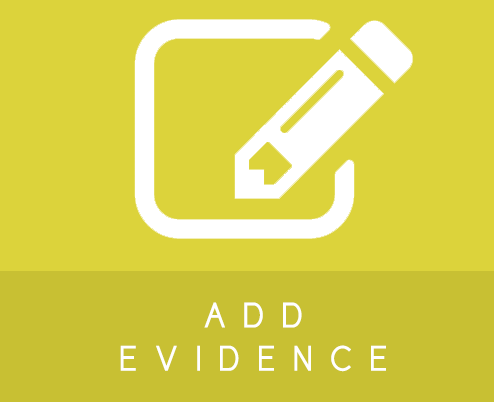
<style>
.page{position:relative;width:494px;height:402px;background:#dcd33b}
.page>*{position:absolute;margin:0}
.t1{font:36px "CicleGordita";letter-spacing:0.5em;color:#ffffff;text-transform:uppercase}
</style>
<div class="page">
<p class="t1" style="left:120px;top:302px;width:266px;height:70px;text-align:center">AdD<br>Evidence</p>
</div>
